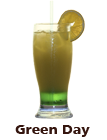
<style>
.page{position:relative;width:107px;height:140px;background:#ffffff}
.page>*{position:absolute;margin:0}
.t1{font:13.3px "Humanist777BT-BlackB";color:#35160f;scale:1.05 1}
</style>
<div class="page">
<p class="t1" style="left:15px;top:125px;width:75px;height:12px">Green Day</p>
</div>
